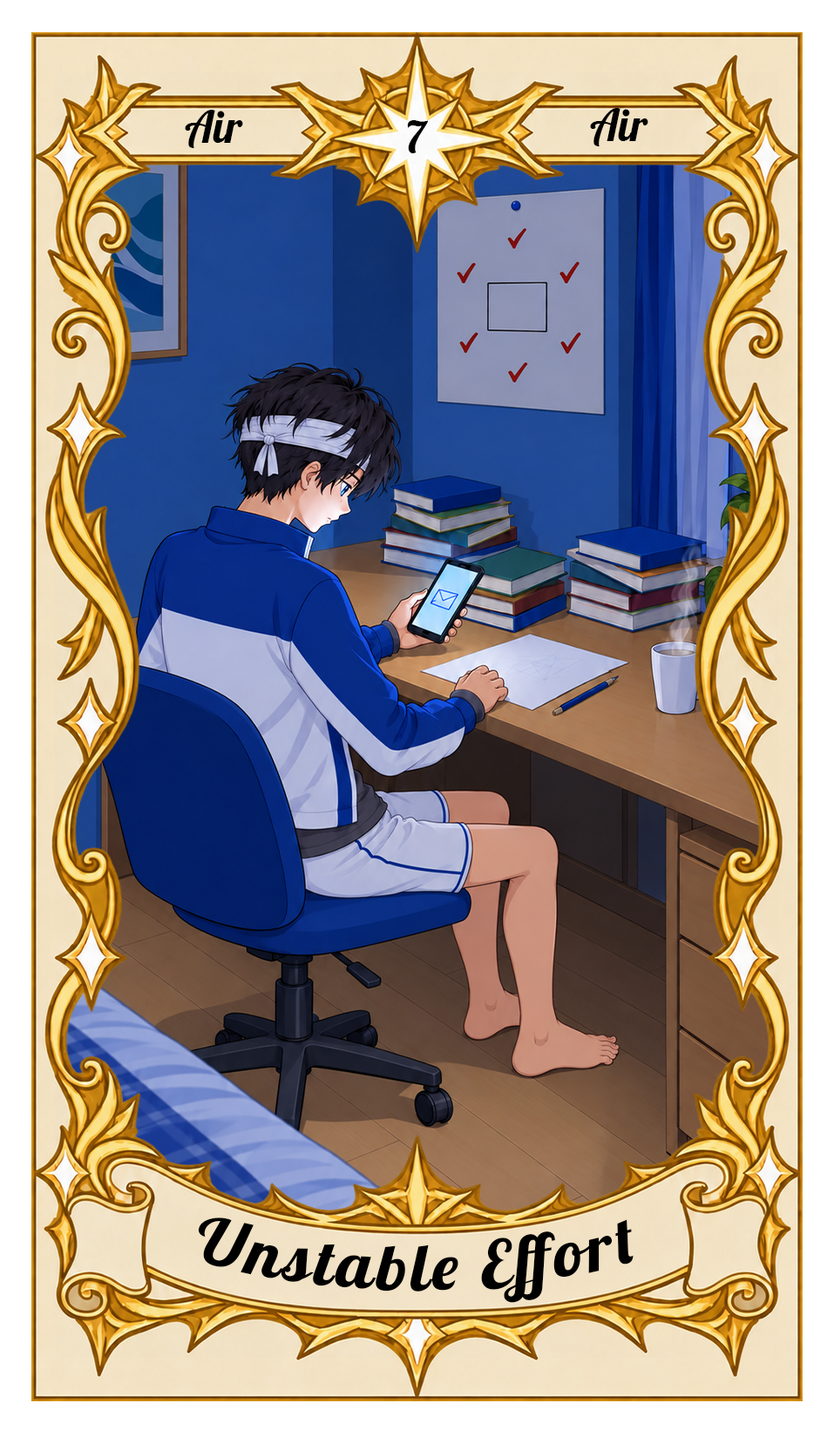
<style>
.page{position:relative;width:834px;height:1430px}
.page>*{position:absolute;margin:0}
.t1{font:43.6px "Lobster-Regular";color:#000000}
.t2{font:65.3px "Lobster-Regular";letter-spacing:0.05em;color:#000000}
</style>
<div class="page">
<p class="t1" style="left:185px;top:110px;width:58px;height:38px">Air</p>
<p class="t1" style="left:590px;top:108px;width:58px;height:38px">Air</p>
<p class="t1" style="left:407px;top:120px;width:21px;height:33px">7</p>
<p class="t2" style="left:198px;top:1218px;width:435px;height:85px">Unstable Effort</p>
</div>
